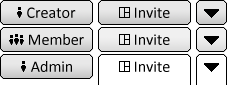
<style>
.page{position:relative;width:227px;height:85px;background:#ffffff}
.page>*{position:absolute;margin:0}
.t1{font:16px "Calibri";color:#000000}
</style>
<div class="page">
<p class="t1" style="left:27px;top:7px;width:49px;height:11px">Creator</p>
<p class="t1" style="left:135px;top:7px;width:35px;height:11px">Invite</p>
<p class="t1" style="left:29px;top:34px;width:55px;height:11px">Member</p>
<p class="t1" style="left:135px;top:34px;width:35px;height:11px">Invite</p>
<p class="t1" style="left:31px;top:61px;width:41px;height:11px">Admin</p>
<p class="t1" style="left:135px;top:61px;width:35px;height:11px">Invite</p>
</div>
